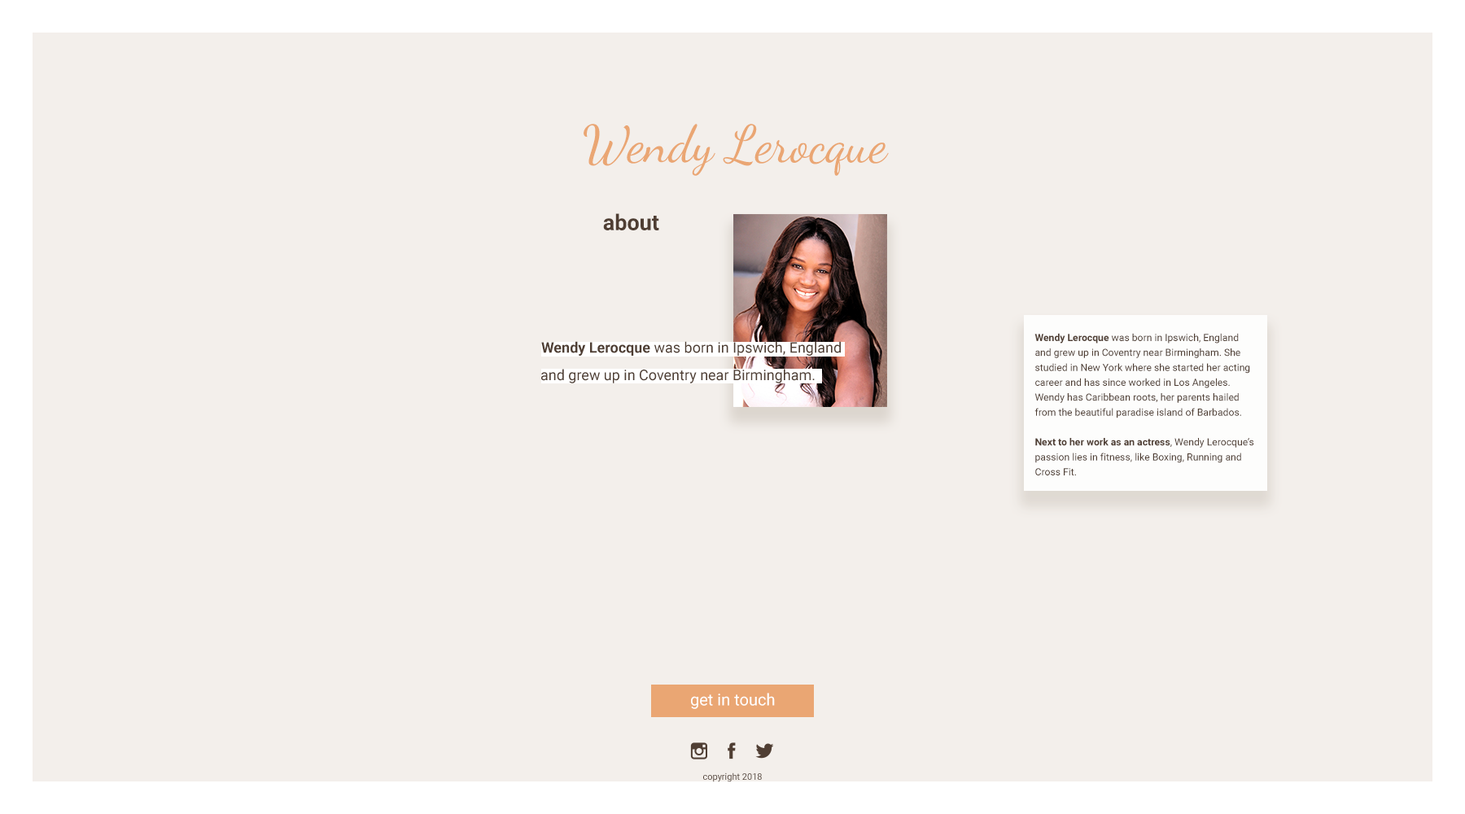
<style>
.page{position:relative;width:1465px;height:814px;background:#f3efeb}
.page>*{position:absolute;margin:0}
.t1{font:51.7px "DancingScript-Regular";color:#eaa673}
.t2{font:22px "Roboto-Bold";color:#4f3e33}
.t3{font:14.7px "Roboto-Regular";color:#4f3e33}
.t4{font:14.7px "Roboto-Bold";color:#4f3e33}
.t5{font:9.9px/14.9px "Roboto-Regular";color:#4f3e33}
.t6{font:9.9px/14.9px "Roboto-Bold";color:#4f3e33}
.t7{font:16.3px "Roboto-Regular";color:#ffffff}
.t8{font:9px "Roboto-Regular";color:#4f3e33}
</style>
<div class="page">
<p class="t1" style="left:584px;top:124px;width:305px;height:52px">Wendy Lerocque</p>
<p class="t2" style="left:603px;top:213px;width:56px;height:17px">about</p>
<p class="t3" style="left:541px;top:341px;width:300px;height:15px"><span class="t4">Wendy Lerocque</span> was born in Ipswich, England</p>
<p class="t5" style="left:1034px;top:333px;width:220px;height:142px"><span class="t6">Wendy Lerocque</span> was born in Ipswich, England and grew up in Coventry near Birmingham. She studied in New York where she started her acting career and has since worked in Los Angeles. <br>Wendy has Caribbean roots, her parents hailed from the beautiful paradise island of Barbados. <br><br><span class="t6">Next to her work as an actress</span>, Wendy Lerocque’s passion lies in fitness, like Boxing, Running and Cross Fit.</p>
<p class="t3" style="left:541px;top:369px;width:274px;height:14px">and grew up in Coventry near Birmingham.</p>
<p class="t7" style="left:691px;top:693px;width:84px;height:16px">get in touch</p>
<p class="t8" style="left:703px;top:772px;width:59px;height:10px">copyright 2018</p>
</div>
